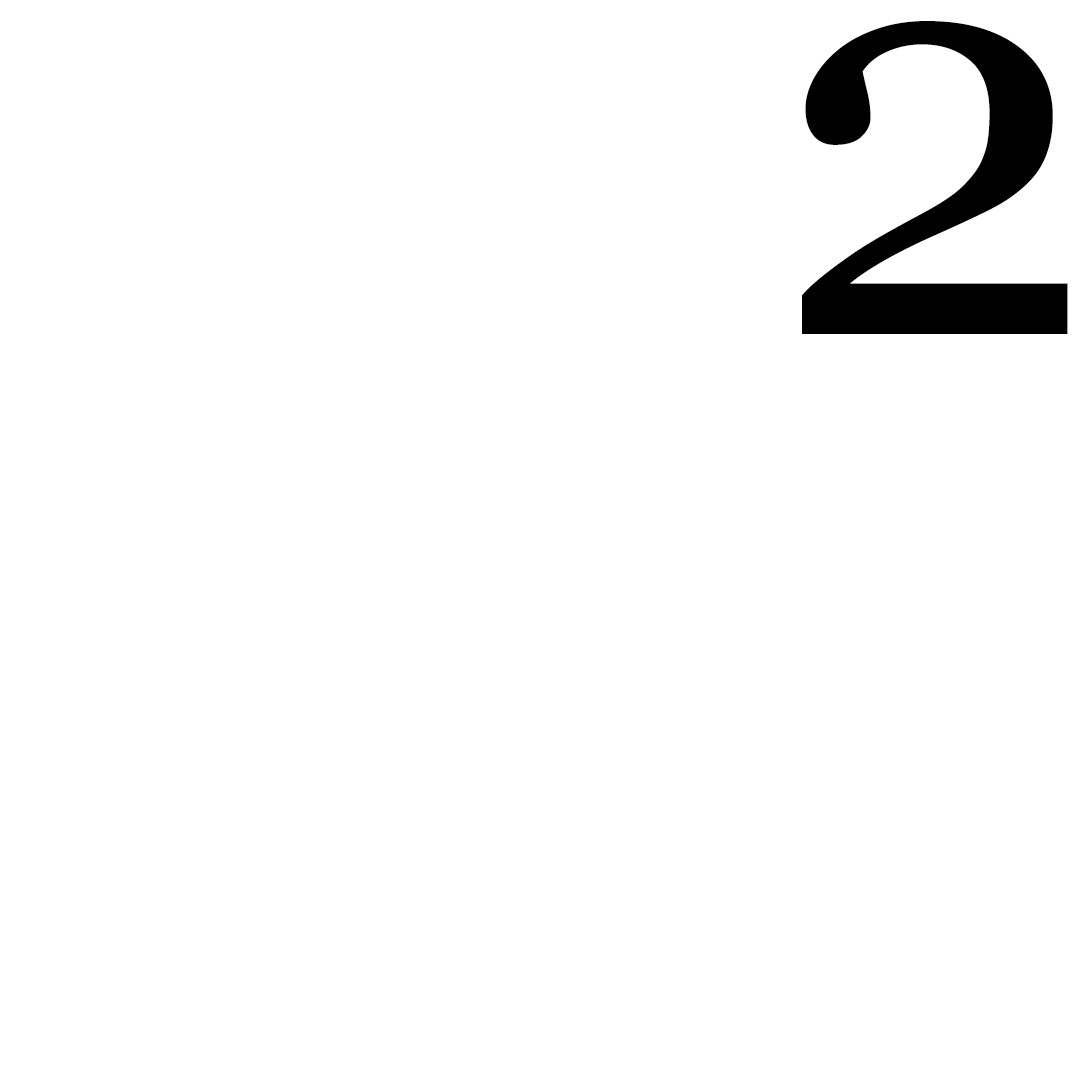
<style>
.page{position:relative;width:1080px;height:1080px;background:#ffffff}
.page>*{position:absolute;margin:0}
.t1{font:579.7px "Georgia";color:#000000}
</style>
<div class="page">
<p class="t1" style="left:802px;top:21px;width:266px;height:313px">2</p>
</div>
